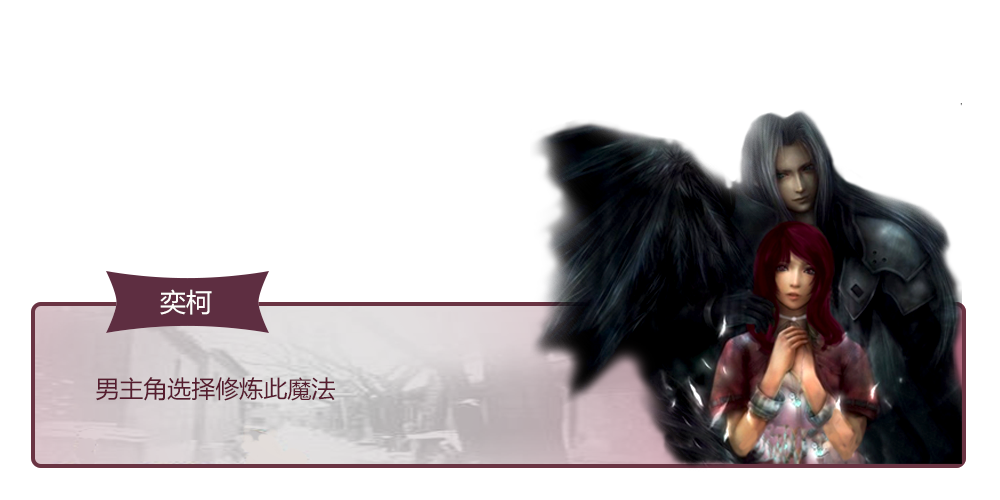
<style>
.page{position:relative;width:1000px;height:500px;background:#ffffff}
.page>*{position:absolute;margin:0}
.t1{font:26px "MicrosoftYaHei";color:#fefefc}
.t2{font:24px "MicrosoftYaHei";color:#571d2f}
</style>
<div class="page">
<p class="t1" style="left:160px;top:289px;width:52px;height:26px">奕柯</p>
<p class="t2" style="left:96px;top:377px;width:239px;height:24px">男主角选择修炼此魔法</p>
</div>
